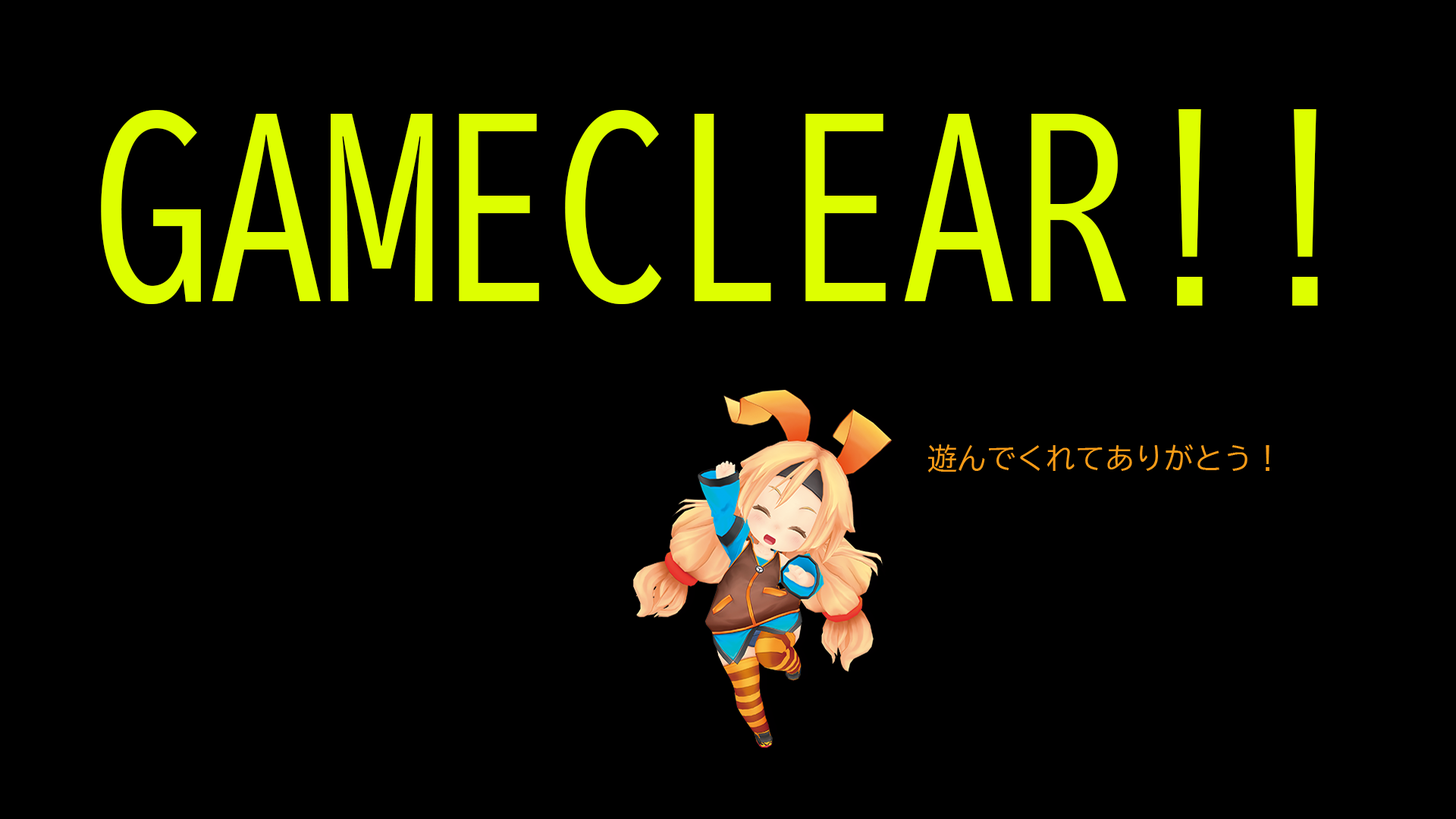
<style>
.page{position:relative;width:1456px;height:819px;background:#000000}
.page>*{position:absolute;margin:0}
.t1{font:230.8px "BIZ-UDGothic";color:#deff00}
</style>
<div class="page">
<p class="t1" style="left:101px;top:109px;width:1217px;height:197px">GAMECLEAR!!</p>
</div>
